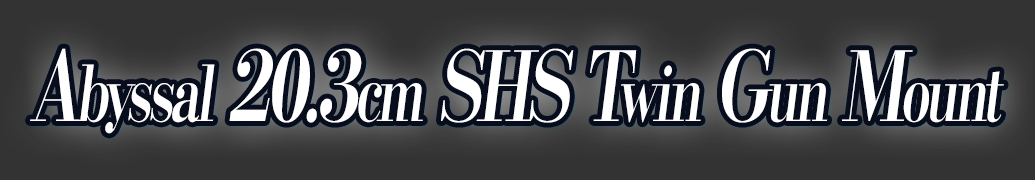
<style>
.page{position:relative;width:1035px;height:180px;background:#333333}
.page>*{position:absolute;margin:0}
.t1{font:76.8px "KochoStd-Heavy";letter-spacing:-0.08em;color:#ffffff;font-style:italic;scale:0.71 1}
.t2{font:96px "KochoStd-Heavy";letter-spacing:-0.08em;color:#ffffff;font-style:italic;scale:0.71 1}
</style>
<div class="page">
<p class="t1" style="left:30px;top:48px;width:974px;height:86px"><span class="t2">A</span>byssal<span class="t2"> 20.3</span>cm<span class="t2"> SHS T</span>win<span class="t2"> G</span>un<span class="t2"> M</span>ount</p>
</div>
